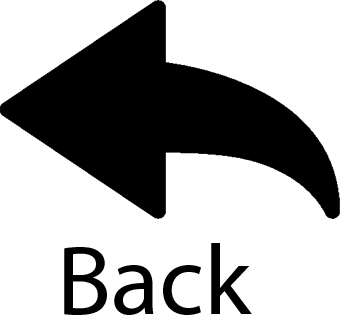
<style>
.page{position:relative;width:340px;height:315px;background:#ffffff}
.page>*{position:absolute;margin:0}
.t1{font:100px "MyriadPro-Regular";color:#000000}
</style>
<div class="page">
<p class="t1" style="left:64px;top:243px;width:188px;height:72px">Back</p>
</div>
